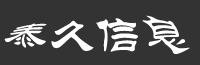
<style>
.page{position:relative;width:200px;height:65px;background:#333333}
.page>*{position:absolute;margin:0}
.t1{font:36px "STLiti";color:#ffffff}
</style>
<div class="page">
<p class="t1" style="left:4px;top:15px;width:186px;height:39px">泰久信息</p>
</div>
